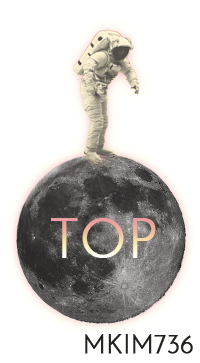
<style>
.page{position:relative;width:200px;height:363px;background:#ffffff}
.page>*{position:absolute;margin:0}
.t1{font:54px "JosefinSans-Light";font-weight:bold}
.t2{font:25px "JosefinSans-Light";color:#20221e;font-weight:bold}
</style>
<div class="page">
<p class="t1" style="left:51px;top:218px;width:105px;height:40px">TOP</p>
<p class="t2" style="left:85px;top:334px;width:108px;height:20px">MKIM736</p>
</div>
